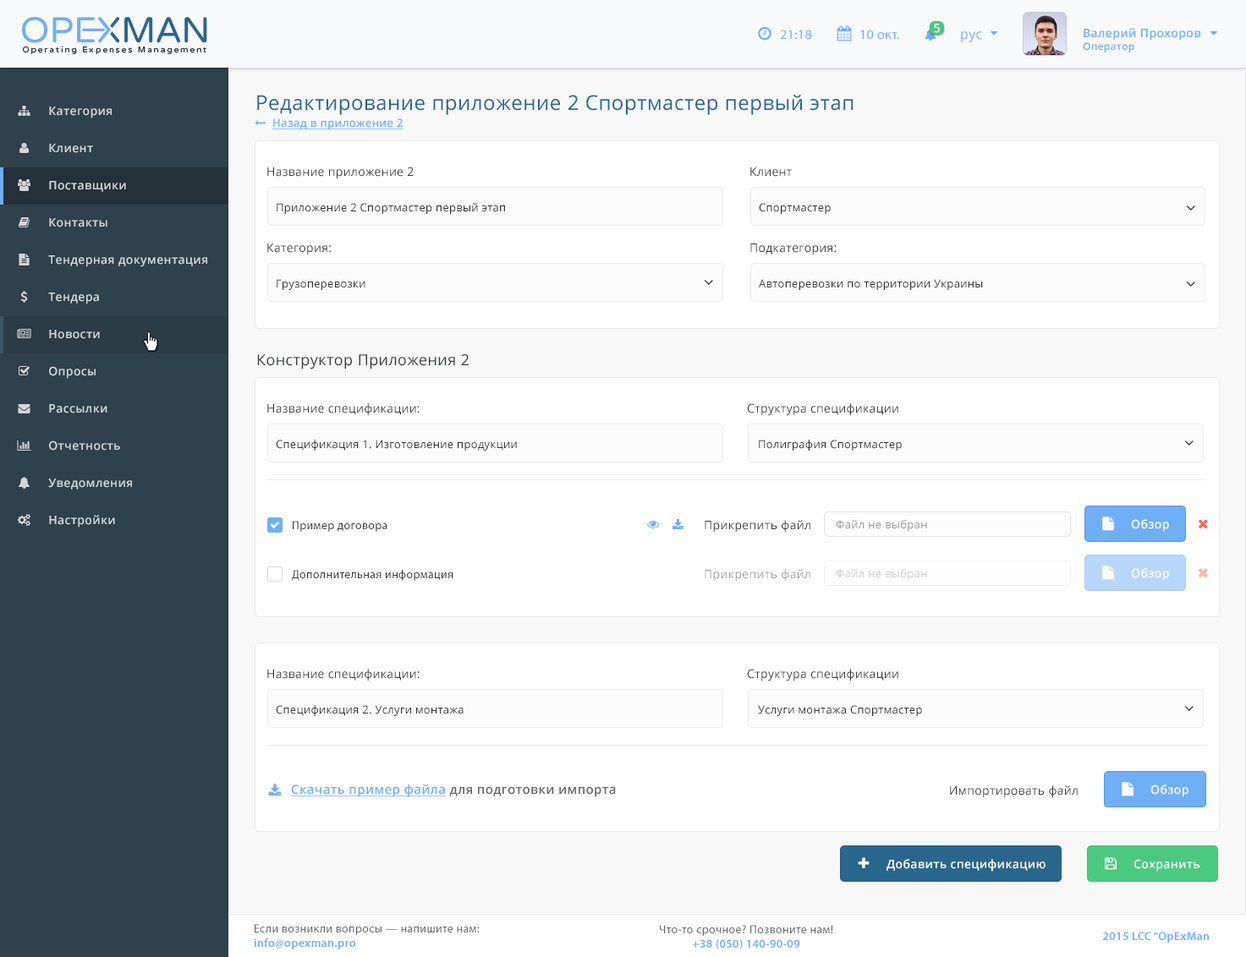
<style>
.page{position:relative;width:1246px;height:957px;background:#ffffff}
.page>*{position:absolute;margin:0}
.t1{font:13.5px "MyriadPro-Regular";letter-spacing:0.025em;color:#6faff8}
.t2{font:11.8px "OpenSans-Semibold";letter-spacing:0.025em;color:#ffffff}
.t3{font:11.8px "OpenSans-Semibold";letter-spacing:0.025em;color:#6eaef7}
.t4{font:10.1px "OpenSans-Semibold";letter-spacing:0.025em;color:#6eaef7}
.t5{font:13.5px "OpenSans";letter-spacing:0.025em;color:#6eaff8}
.t6{font:20.2px "OpenSans";letter-spacing:0.025em;color:#29658b}
.t7{font:11.8px "OpenSans-Semibold";letter-spacing:0.025em;color:#d2d5d7}
.t8{font:11px "OpenSans-Semibold";letter-spacing:0.025em;color:#6faff8;text-decoration:underline}
.t9{font:11.8px "OpenSans";letter-spacing:0.025em;color:#373838}
.t10{font:11px "OpenSans";letter-spacing:0.025em;color:#333333}
.t11{font:15.2px "OpenSans";letter-spacing:0.025em;color:#373838}
.t12{font:11.8px "MyriadPro-Regular";letter-spacing:0.025em;color:#3a3a3a}
.t13{font:11.8px "OpenSans";letter-spacing:0.025em;color:#333333}
.t14{font:11px "OpenSans";letter-spacing:0.025em;color:#999999}
.t15{font:11.8px "OpenSans";letter-spacing:0.025em;color:#999999}
.t16{font:11px "OpenSans";letter-spacing:0.025em;color:#cccccc}
.t17{font:12.6px "OpenSans-Semibold";letter-spacing:0.025em;color:#656565}
.t18{font:12.6px "OpenSans-Semibold";letter-spacing:0.025em;color:#6faff8;text-decoration:underline}
.t19{font:11.8px "MyriadPro-Regular";letter-spacing:0.025em;color:#696969}
.t20{font:11.8px "MyriadPro-Semibold";letter-spacing:0.025em;color:#6eaef8}
</style>
<div class="page">
<p class="t1" style="left:780px;top:30px;width:32px;height:10px">21:18</p>
<p class="t1" style="left:860px;top:30px;width:39px;height:10px">10 окт.</p>
<p class="t2" style="left:934px;top:24px;width:6px;height:9px">5</p>
<p class="t3" style="left:1082px;top:28px;width:119px;height:24px">Валерий Прохоров<br><span class="t4">Оператор</span></p>
<p class="t5" style="left:961px;top:31px;width:21px;height:11px">рус</p>
<p class="t6" style="left:257px;top:95px;width:596px;height:20px">Редактирование приложение 2 Спортмастер первый этап</p>
<p class="t7" style="left:49px;top:107px;width:63px;height:11px">Категория</p>
<p class="t8" style="left:272px;top:118px;width:131px;height:11px">Назад в приложение 2</p>
<p class="t7" style="left:49px;top:144px;width:44px;height:9px">Клиент</p>
<p class="t9" style="left:267px;top:167px;width:147px;height:12px">Название приложение 2</p>
<p class="t9" style="left:750px;top:167px;width:42px;height:10px">Клиент</p>
<p class="t7" style="left:49px;top:181px;width:77px;height:11px">Поставщики</p>
<p class="t10" style="left:277px;top:203px;width:228px;height:11px">Приложение 2 Спортмастер первый этап</p>
<p class="t10" style="left:759px;top:203px;width:71px;height:11px">Спортмастер</p>
<p class="t7" style="left:49px;top:218px;width:58px;height:9px">Контакты</p>
<p class="t9" style="left:267px;top:244px;width:64px;height:11px">Категория:</p>
<p class="t9" style="left:750px;top:244px;width:86px;height:11px">Подкатегория:</p>
<p class="t7" style="left:48px;top:255px;width:159px;height:12px">Тендерная документация</p>
<p class="t10" style="left:277px;top:279px;width:88px;height:11px">Грузоперевозки</p>
<p class="t10" style="left:759px;top:279px;width:224px;height:11px">Автоперевозки по территории Украины</p>
<p class="t7" style="left:48px;top:293px;width:51px;height:11px">Тендера</p>
<p class="t7" style="left:49px;top:330px;width:51px;height:9px">Новости</p>
<p class="t11" style="left:257px;top:354px;width:211px;height:16px">Конструктор Приложения 2</p>
<p class="t7" style="left:49px;top:366px;width:47px;height:13px">Опросы</p>
<p class="t7" style="left:49px;top:404px;width:58px;height:10px">Рассылки</p>
<p class="t9" style="left:267px;top:403px;width:152px;height:13px">Название спецификации:</p>
<p class="t9" style="left:747px;top:403px;width:151px;height:13px">Структура спецификации</p>
<p class="t7" style="left:49px;top:441px;width:71px;height:10px">Отчетность</p>
<p class="t10" style="left:276px;top:440px;width:241px;height:11px">Спецификация 1. Изготовление продукции</p>
<p class="t10" style="left:759px;top:440px;width:142px;height:11px">Полиграфия Спортмастер</p>
<p class="t7" style="left:48px;top:479px;width:84px;height:11px">Уведомления</p>
<p class="t7" style="left:49px;top:515px;width:66px;height:13px">Настройки</p>
<p class="t12" style="left:293px;top:521px;width:94px;height:11px">Пример договора</p>
<p class="t13" style="left:704px;top:520px;width:106px;height:13px">Прикрепить файл</p>
<p class="t14" style="left:836px;top:520px;width:91px;height:11px">Файл не выбран</p>
<p class="t2" style="left:1131px;top:519px;width:38px;height:13px">Обзор</p>
<p class="t12" style="left:292px;top:570px;width:161px;height:11px">Дополнительная информация</p>
<p class="t15" style="left:704px;top:569px;width:106px;height:13px">Прикрепить файл</p>
<p class="t16" style="left:836px;top:569px;width:91px;height:11px">Файл не выбран</p>
<p class="t2" style="left:1131px;top:568px;width:38px;height:13px">Обзор</p>
<p class="t9" style="left:267px;top:669px;width:152px;height:13px">Название спецификации:</p>
<p class="t9" style="left:747px;top:669px;width:151px;height:13px">Структура спецификации</p>
<p class="t10" style="left:276px;top:705px;width:187px;height:11px">Спецификация 2. Услуги монтажа</p>
<p class="t10" style="left:758px;top:705px;width:164px;height:11px">Услуги монтажа Спортмастер</p>
<p class="t17" style="left:291px;top:784px;width:325px;height:13px"><span class="t18">Скачать пример файла</span> для подготовки импорта</p>
<p class="t9" style="left:950px;top:786px;width:127px;height:12px">Импортировать файл</p>
<p class="t2" style="left:1150px;top:785px;width:38px;height:12px">Обзор</p>
<p class="t2" style="left:886px;top:859px;width:159px;height:13px">Добавить спецификацию</p>
<p class="t2" style="left:1133px;top:859px;width:66px;height:13px">Сохранить</p>
<p class="t19" style="left:254px;top:924px;width:225px;height:26px">Если возникли вопросы — напишите нам:<br><span class="t20">info@opexman.pro</span></p>
<p class="t19" style="left:660px;top:925px;width:173px;height:25px;text-align:center">Что-то срочное? Позвоните нам!<br><span class="t20">+38 (050) 140-90-09</span></p>
<p class="t20" style="left:1103px;top:932px;width:105px;height:11px">2015 LCC “OpExMan</p>
</div>
